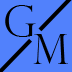
<style>
.page{position:relative;width:72px;height:72px;background:#5181fc}
.page>*{position:absolute;margin:0}
.t1{font:42px "PerpetuaTitlingMT-Light";color:#000000}
</style>
<div class="page">
<p class="t1" style="left:5px;top:5px;width:31px;height:32px">G</p>
<p class="t1" style="left:33px;top:34px;width:35px;height:30px">M</p>
</div>
